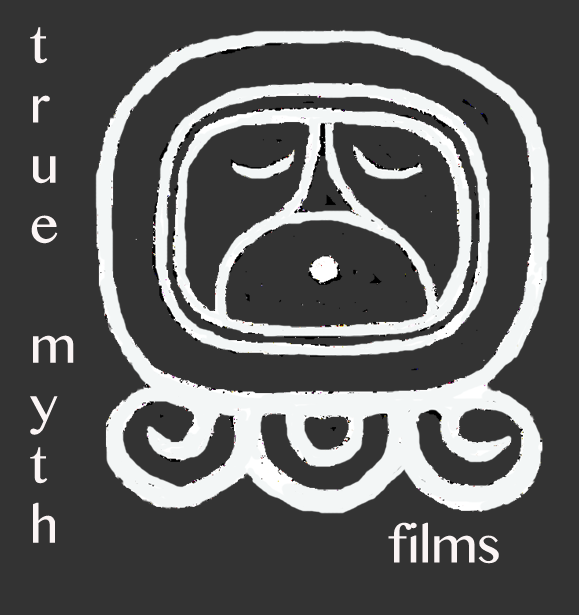
<style>
.page{position:relative;width:579px;height:615px;background:#333333}
.page>*{position:absolute;margin:0}
.t1{font:50px "MyanmarMN";color:#fbf5f5}
</style>
<div class="page">
<p class="t1" style="left:30px;top:27px;width:44px;height:516px">t<br>r<br>u<br>e<br><br>m<br>y<br>t<br>h</p>
<p class="t1" style="left:388px;top:522px;width:111px;height:42px">films</p>
</div>
